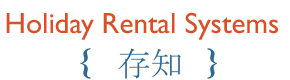
<style>
.page{position:relative;width:290px;height:80px;background:#ffffff}
.page>*{position:absolute;margin:0}
.t1{font:29.2px "GillSansMT";color:#dc4f26}
</style>
<div class="page">
<p class="t1" style="left:6px;top:12px;width:272px;height:28px">Holiday Rental Systems</p>
</div>
